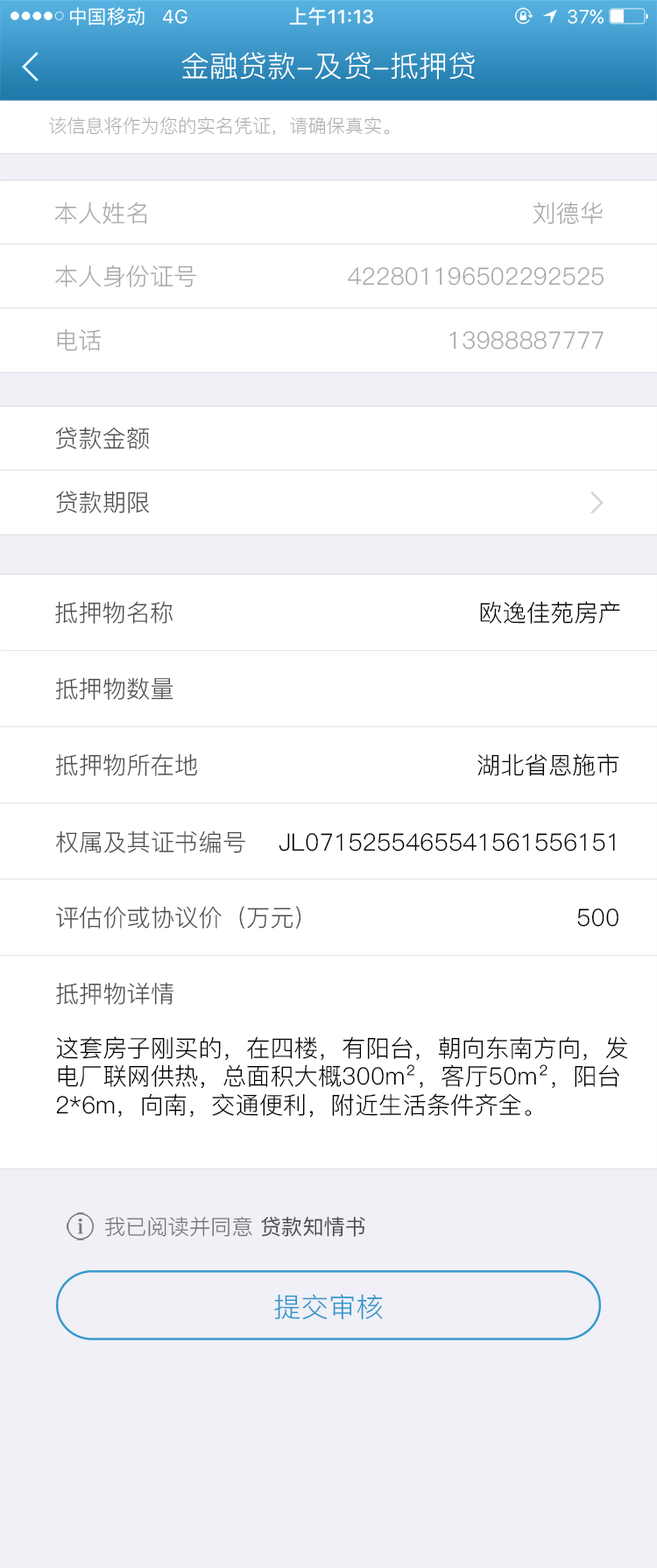
<style>
.page{position:relative;width:657px;height:1568px;background:#ffffff}
.page>*{position:absolute;margin:0}
.t1{font:29.2px "PingFang-SC-Regular";color:#ffffff}
.t2{font:18.5px "PingFang-SC-Light";color:#a5a5a5}
.t3{font:23.8px "PingFang-SC-Regular";color:#a7a7a7}
.t4{font:23.8px "PingFang-SC-Regular";color:#4d4d4d}
.t5{font:23.8px "PingFang-SC-Regular";color:#000000}
.t6{font:21.2px "PingFang-SC-Regular";color:#747272}
.t7{font:21.2px "PingFang-SC-Medium";color:#4d4d4d}
.t8{font:27.1px "PingFang-SC-Regular";color:#3397cc}
</style>
<div class="page">
<p class="t1" style="left:181px;top:52px;width:294px;height:28px">金融贷款-及贷-抵押贷</p>
<p class="t2" style="left:48px;top:117px;width:342px;height:18px">该信息将作为您的实名凭证，请确保真实。</p>
<p class="t3" style="left:54px;top:201px;width:93px;height:23px">本人姓名</p>
<p class="t3" style="left:533px;top:201px;width:70px;height:23px">刘德华</p>
<p class="t3" style="left:55px;top:265px;width:141px;height:22px">本人身份证号</p>
<p class="t3" style="left:348px;top:267px;width:256px;height:19px">422801196502292525</p>
<p class="t3" style="left:57px;top:328px;width:45px;height:23px">电话</p>
<p class="t3" style="left:449px;top:331px;width:155px;height:19px">13988887777</p>
<p class="t4" style="left:55px;top:427px;width:95px;height:22px">贷款金额</p>
<p class="t4" style="left:56px;top:491px;width:94px;height:22px">贷款期限</p>
<p class="t4" style="left:55px;top:601px;width:118px;height:23px">抵押物名称</p>
<p class="t5" style="left:480px;top:601px;width:140px;height:23px">欧逸佳苑房产</p>
<p class="t4" style="left:55px;top:677px;width:118px;height:23px">抵押物数量</p>
<p class="t4" style="left:55px;top:753px;width:142px;height:23px">抵押物所在地</p>
<p class="t5" style="left:477px;top:753px;width:142px;height:23px">湖北省恩施市</p>
<p class="t4" style="left:56px;top:830px;width:189px;height:23px">权属及其证书编号</p>
<p class="t5" style="left:279px;top:833px;width:336px;height:18px">JL0715255465541561556151</p>
<p class="t4" style="left:56px;top:906px;width:245px;height:23px">评估价或协议价（万元）</p>
<p class="t5" style="left:577px;top:908px;width:41px;height:19px">500</p>
<p class="t4" style="left:56px;top:982px;width:117px;height:23px">抵押物详情</p>
<p class="t5" style="left:56px;top:1036px;width:572px;height:82px">这套房子刚买的，在四楼，有阳台，朝向东南方向，发<br>电厂联网供热，总面积大概300m²，客厅50m²，阳台<br>2*6m，向南，交通便利，附近生活条件齐全。</p>
<p class="t6" style="left:105px;top:1217px;width:260px;height:20px">我已阅读并同意 <span class="t7">贷款知情书</span></p>
<p class="t8" style="left:274px;top:1294px;width:109px;height:26px">提交审核</p>
</div>
